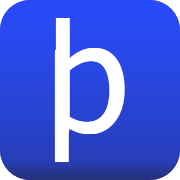
<style>
.page{position:relative;width:180px;height:180px}
.page>*{position:absolute;margin:0}
.t1{font:150px "Tahoma";color:#ffffff}
</style>
<div class="page">
<p class="t1" style="left:54px;top:18px;width:71px;height:144px">bp</p>
</div>
